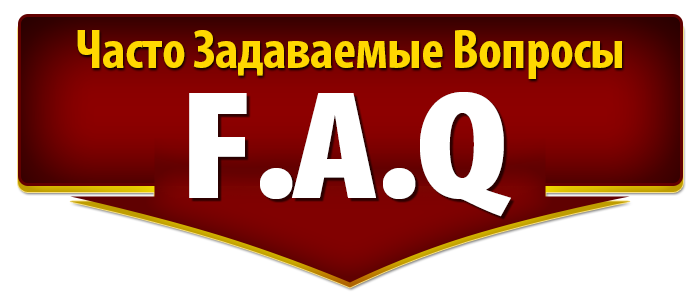
<style>
.page{position:relative;width:700px;height:300px;background:#ffffff}
.page>*{position:absolute;margin:0}
.t1{font:55px "MyriadPro-BoldCond";letter-spacing:-0.01em;color:#ffd800}
.t2{font:155.3px "MyriadPro-BlackCond";letter-spacing:-0.025em;color:#ffffff;scale:1.19 1}
</style>
<div class="page">
<p class="t1" style="left:77px;top:30px;width:545px;height:49px">Часто Задаваемые Вопросы</p>
<p class="t2" style="left:189px;top:92px;width:322px;height:125px">F.A.Q</p>
</div>
